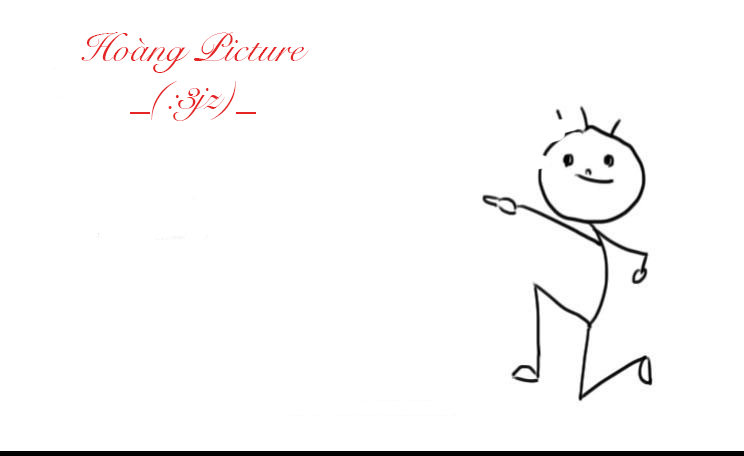
<style>
.page{position:relative;width:744px;height:456px;background:#ffffff}
.page>*{position:absolute;margin:0}
.t1{font:40px "SnellRoundhand";color:#e52525}
</style>
<div class="page">
<p class="t1" style="left:81px;top:32px;width:228px;height:89px">Hoàng Picture<br>             _(:3jz)_</p>
</div>
